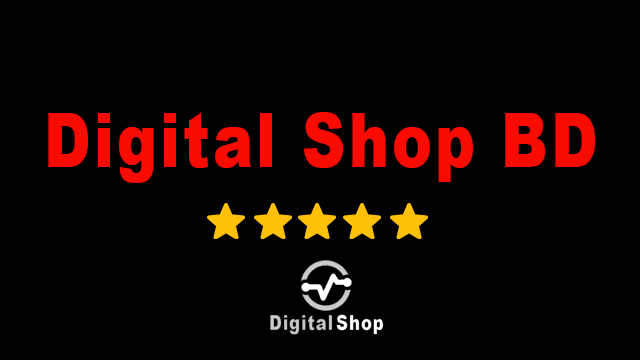
<style>
.page{position:relative;width:640px;height:360px;background:#000000}
.page>*{position:absolute;margin:0}
.t1{font:75.6px "Arial-Black";letter-spacing:0.05em;color:#fa0b02;scale:0.8 1}
</style>
<div class="page">
<p class="t1" style="left:48px;top:112px;width:547px;height:71px">Digital Shop BD</p>
</div>
